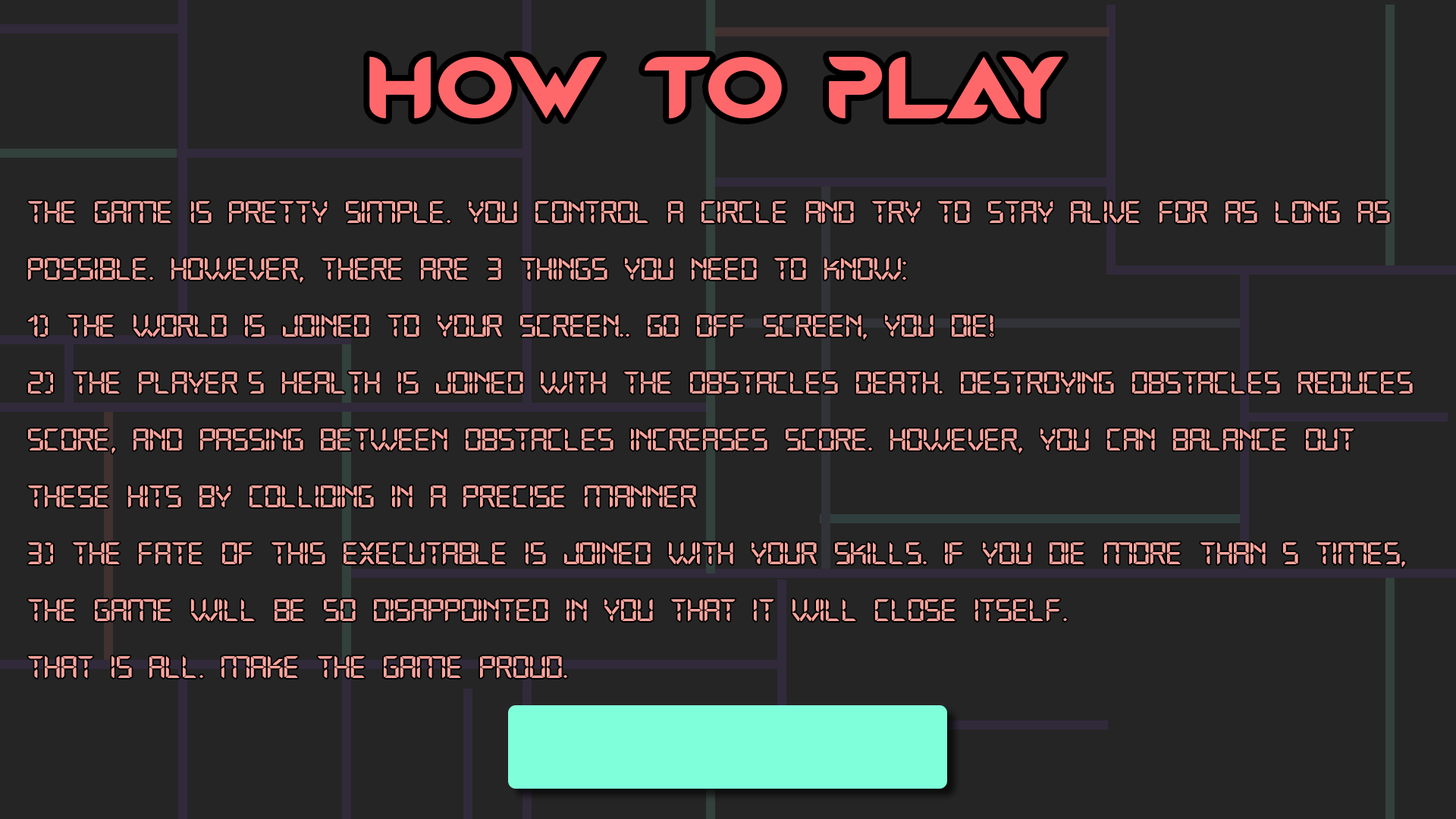
<style>
.page{position:relative;width:1456px;height:819px;background:#252525}
.page>*{position:absolute;margin:0}
.t1{font:84.9px "MagmawaveCaps-Bold";color:#ff686b;scale:1.2 1}
.t2{font:31.4px/56.9px "Open24DisplaySt";color:#ffa69e;scale:1.2 1}
</style>
<div class="page">
<p class="t1" style="left:369px;top:56px;width:694px;height:63px">HOW TO PLAY</p>
<p class="t2" style="left:28px;top:201px;width:1385px;height:477px">The game is pretty simple. You control a circle and try to stay alive for as long as<br>possible. However, there are 3 things you need to know:<br>1) The world is joined to your screen.. Go off screen, you die!<br>2) The player’s health is joined with the obstacles death. Destroying obstacles reduces<br>score, and passing between obstacles increases score. However, you can balance out<br>these hits by colliding in a precise manner<br>3) The fate of this executable is joined with your skills. if you die more than 5 times,<br>the game will be so disappointed in you that it will close itself.<br>That is all. Make the game proud.</p>
</div>
